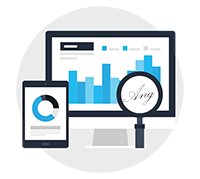
<style>
.page{position:relative;width:200px;height:179px;background:#ffffff}
.page>*{position:absolute;margin:0}
.t1{font:25.5px "PalaceScriptMT"}
</style>
<div class="page">
<p class="t1" style="left:123px;top:84px;width:32px;height:21px;rotate:-9deg">Ang</p>
</div>
